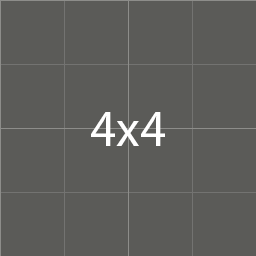
<style>
.page{position:relative;width:256px;height:256px;background:#5b5b58}
.page>*{position:absolute;margin:0}
.t1{font:51px "MyriadPro-Regular";color:#ffffff}
</style>
<div class="page">
<p class="t1" style="left:91px;top:112px;width:74px;height:34px">4x4</p>
</div>
